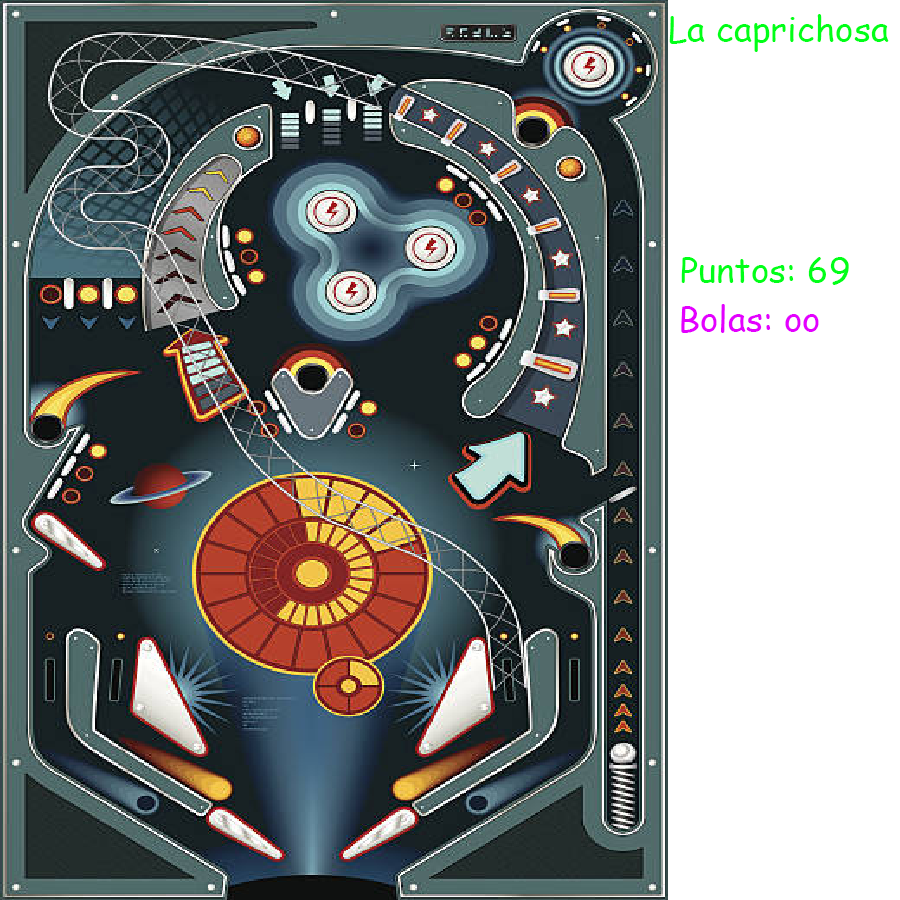
<style>
.page{position:relative;width:900px;height:900px;background:#ffffff}
.page>*{position:absolute;margin:0}
.t1{font:35px "ComicSansMS";color:#00ff18}
.t2{font:35px "ComicSansMS";color:#e400ff}
</style>
<div class="page">
<p class="t1" style="left:669px;top:14px;width:220px;height:38px">La caprichosa</p>
<p class="t1" style="left:681px;top:257px;width:168px;height:28px">Puntos: 69</p>
<p class="t2" style="left:681px;top:304px;width:138px;height:29px">Bolas: oo</p>
</div>
